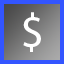
<style>
.page{position:relative;width:64px;height:64px;background:#3355ff}
.page>*{position:absolute;margin:0}
.t1{font:48px "MyriadPro-Regular";color:#ffffff}
</style>
<div class="page">
<p class="t1" style="left:23px;top:12px;width:18px;height:40px">$</p>
</div>
